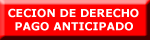
<style>
.page{position:relative;width:150px;height:40px;background:#ff0000}
.page>*{position:absolute;margin:0}
.t1{font:11px "Verdana-Bold";color:#ffffff}
</style>
<div class="page">
<p class="t1" style="left:8px;top:8px;width:131px;height:23px">CECION DE DERECHO<br>  PAGO ANTICIPADO</p>
</div>
